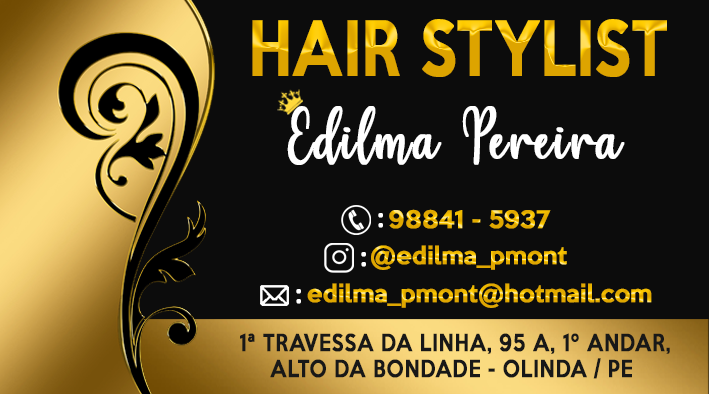
<style>
.page{position:relative;width:709px;height:394px;background:#0c0c0c}
.page>*{position:absolute;margin:0}
.t1{font:68.4px "KeepCalm-Medium";text-transform:uppercase;font-weight:bold;scale:0.8 1}
.t2{font:70.8px "HelloRegular";letter-spacing:0.025em;color:#ffffff;font-weight:bold;scale:0.81 1}
.t3{font:22.2px "KeepCalm-Medium";color:#e8b200;font-weight:bold}
.t4{font:40px "Vogue-Regular";color:#ffffff;font-weight:bold}
.t5{font:22.2px "KeepCalm-Medium";color:#e7b100;font-weight:bold}
.t6{font:22.2px "KeepCalm-Medium";color:#e6af00;font-weight:bold}
.t7{font:21.6px "KeepCalm-Medium";letter-spacing:0.025em;color:#181818;text-transform:uppercase;font-weight:bold;scale:0.85 1}
</style>
<div class="page">
<p class="t1" style="left:252px;top:19px;width:415px;height:58px">hair stylist</p>
<p class="t2" style="left:287px;top:106px;width:338px;height:59px">Edilma Pereira</p>
<p class="t3" style="left:389px;top:209px;width:162px;height:20px">98841 - 5937</p>
<p class="t4" style="left:378px;top:213px;width:5px;height:15px">:</p>
<p class="t5" style="left:371px;top:245px;width:196px;height:25px">@edilma_pmont</p>
<p class="t4" style="left:361px;top:252px;width:5px;height:15px">:</p>
<p class="t4" style="left:296px;top:289px;width:5px;height:15px">:</p>
<p class="t6" style="left:307px;top:283px;width:345px;height:25px">edilma_pmont@hotmail.com</p>
<p class="t7" style="left:240px;top:333px;width:430px;height:46px;text-align:center">1ª travessa da linha, 95 A, 1º andar,<br>Alto da bondade - olinda / pe</p>
</div>
